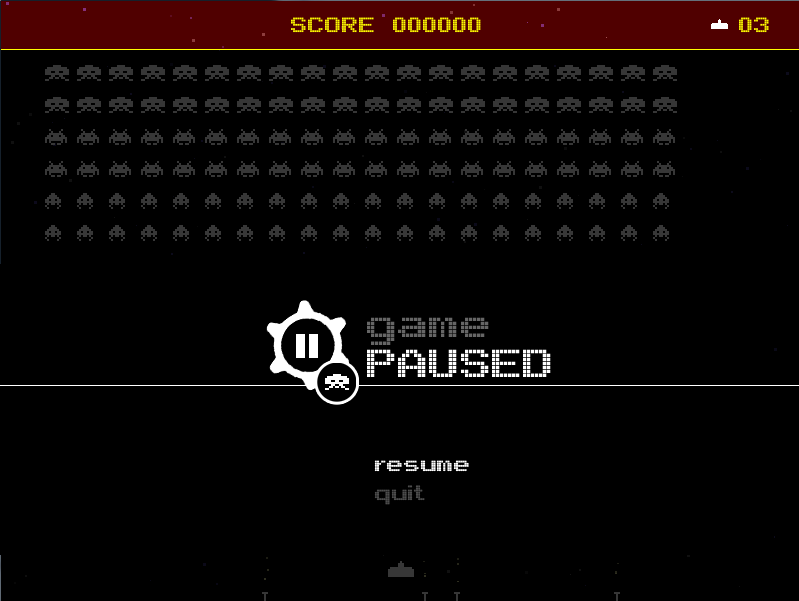
<style>
.page{position:relative;width:799px;height:601px;background:#000000}
.page>*{position:absolute;margin:0}
.t1{font:60px "Arcade";color:#666666}
.t2{font:60px "Arcade";color:#ffffff}
.t3{font:32px "Arcade";color:#ffffff}
.t4{font:32px "Arcade";color:#4d4d4d}
</style>
<div class="page">
<p class="t1" style="left:367px;top:317px;width:122px;height:28px">game</p>
<p class="t2" style="left:367px;top:349px;width:184px;height:28px">PAUSED</p>
<p class="t3" style="left:374px;top:460px;width:95px;height:12px">resume</p>
<p class="t4" style="left:374px;top:485px;width:51px;height:20px">quit</p>
</div>
